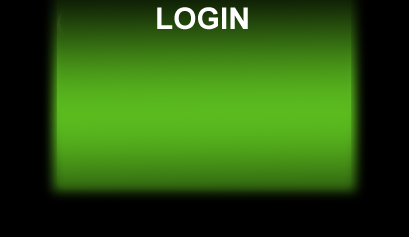
<style>
.page{position:relative;width:409px;height:237px;background:#000000}
.page>*{position:absolute;margin:0}
.t1{font:30px "Arial-BoldMT";color:#ffffff}
</style>
<div class="page">
<p class="t1" style="left:157px;top:7px;width:91px;height:23px">LOGIN</p>
</div>
